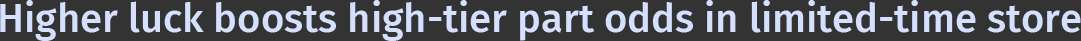
<style>
.page{position:relative;width:1081px;height:41px;background:#333333}
.page>*{position:absolute;margin:0}
.t1{font:40px "FiraSans-Medium";color:#d5e0ff}
</style>
<div class="page">
<p class="t1" style="left:0px;top:0px;width:1081px;height:41px">Higher luck boosts high-tier part odds in limited-time store</p>
</div>
